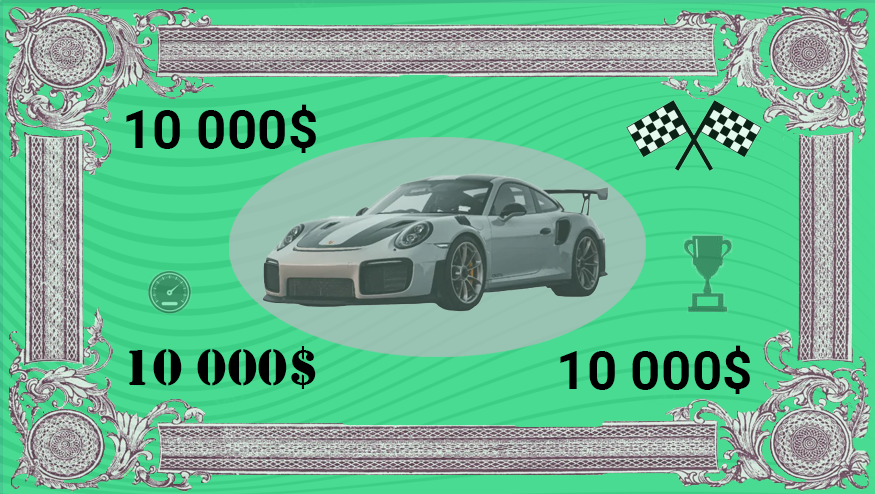
<style>
.page{position:relative;width:875px;height:494px;background:#4adb92}
.page>*{position:absolute;margin:0}
.t1{font:53.3px "Roboto-Bold";color:#000000}
.t2{font:53.3px "Stencil";color:#000000}
</style>
<div class="page">
<p class="t1" style="left:126px;top:104px;width:190px;height:49px">10 000$</p>
<p class="t2" style="left:129px;top:346px;width:187px;height:43px">10 000$</p>
<p class="t1" style="left:560px;top:345px;width:190px;height:49px">10 000$</p>
</div>
